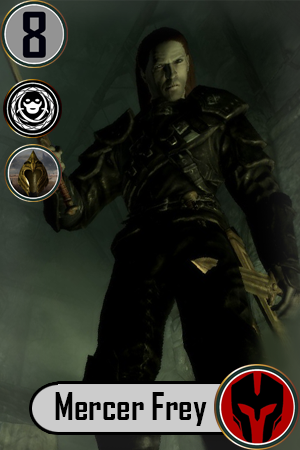
<style>
.page{position:relative;width:300px;height:450px}
.page>*{position:absolute;margin:0}
.t1{font:36px "AgencyFB-Bold";color:#000000}
</style>
<div class="page">
<p class="t1" style="left:55px;top:392px;width:152px;height:34px">Mercer Frey</p>
</div>
